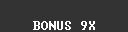
<style>
.page{position:relative;width:128px;height:32px;background:#333333}
.page>*{position:absolute;margin:0}
.t1{font:12px "Terminal";color:#ffffff}
</style>
<div class="page">
<p class="t1" style="left:33px;top:21px;width:62px;height:9px">BONUS 9X</p>
</div>
